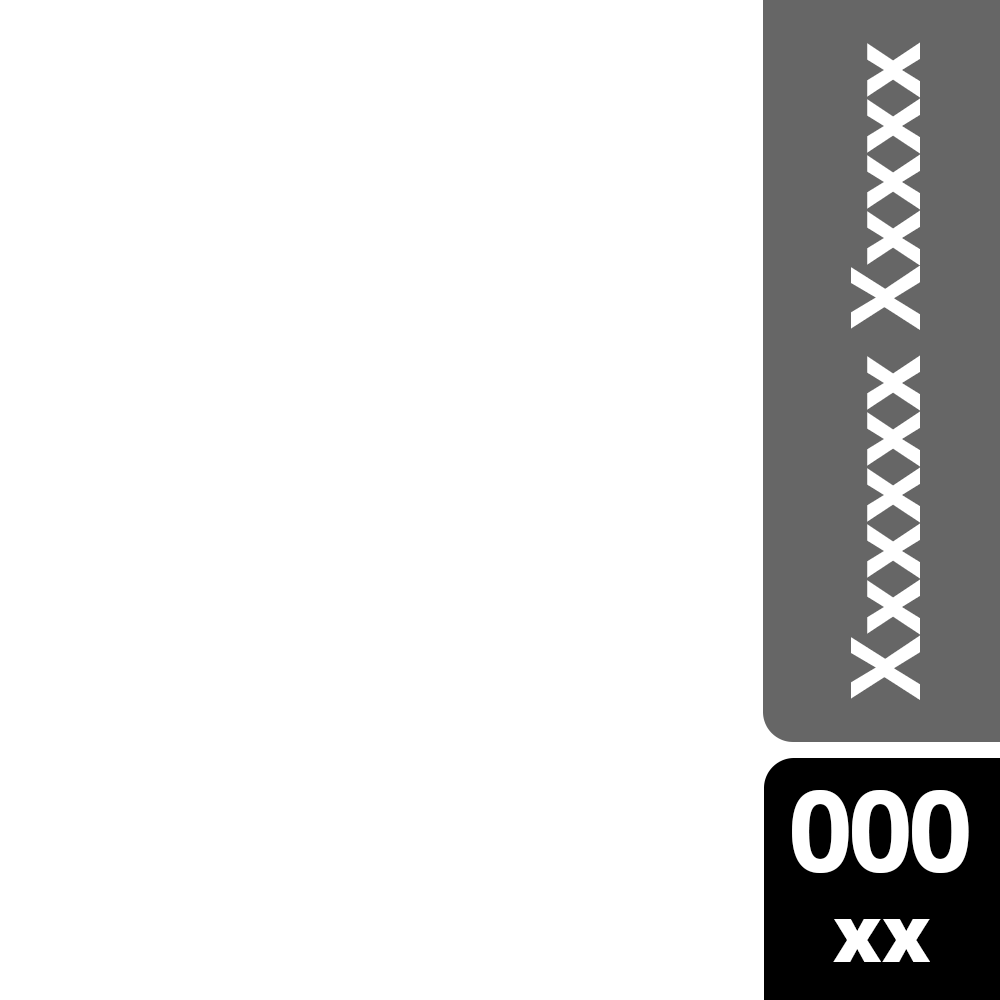
<style>
.page{position:relative;width:1000px;height:1000px;background:#ffffff}
.page>*{position:absolute;margin:0}
.t1{font:96.7px "OpenSans-Bold";color:#ffffff}
.t2{font:113.4px "OpenSans-Bold";letter-spacing:-0.04em;color:#ffffff;text-transform:uppercase}
.t3{font:76.6px "OpenSans-Extrabold";color:#ffffff}
</style>
<div class="page">
<p class="t1" style="left:851px;top:42px;width:69px;height:658px;rotate:-90deg">Xxxxxx Xxxxx</p>
<p class="t2" style="left:792px;top:790px;width:177px;height:83px">000</p>
<p class="t3" style="left:833px;top:919px;width:97px;height:43px">xx</p>
</div>
